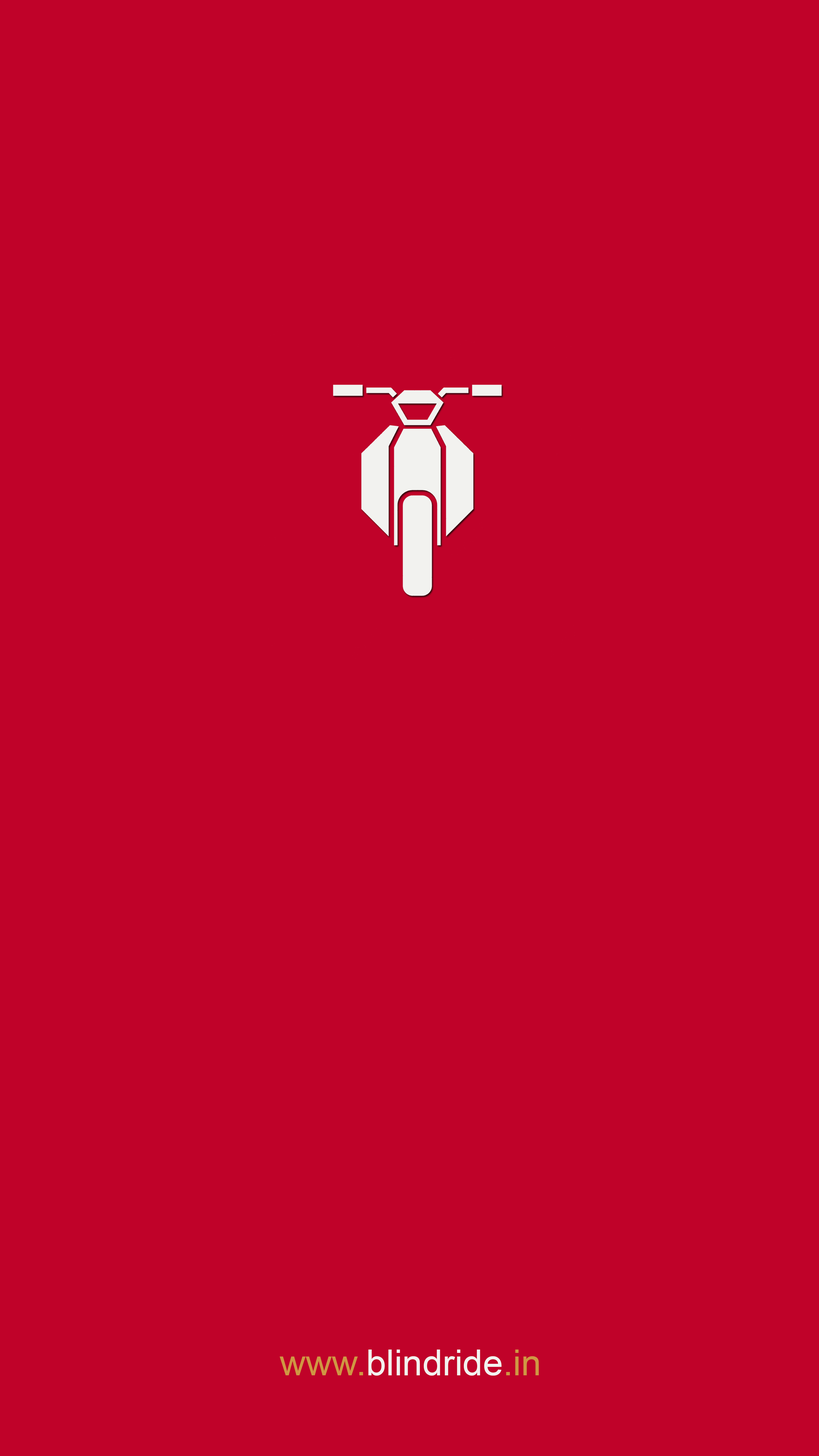
<style>
.page{position:relative;width:819px;height:1456px;background:#c00229}
.page>*{position:absolute;margin:0}
.t1{font:36.2px "ArialMT";color:#f2f2ef}
.t2{font:36.2px "ArialMT";color:#cf9743}
</style>
<div class="page">
<p class="t1" style="left:280px;top:1350px;width:259px;height:26px"><span class="t2">www.</span>blindride<span class="t2">.in</span></p>
</div>
